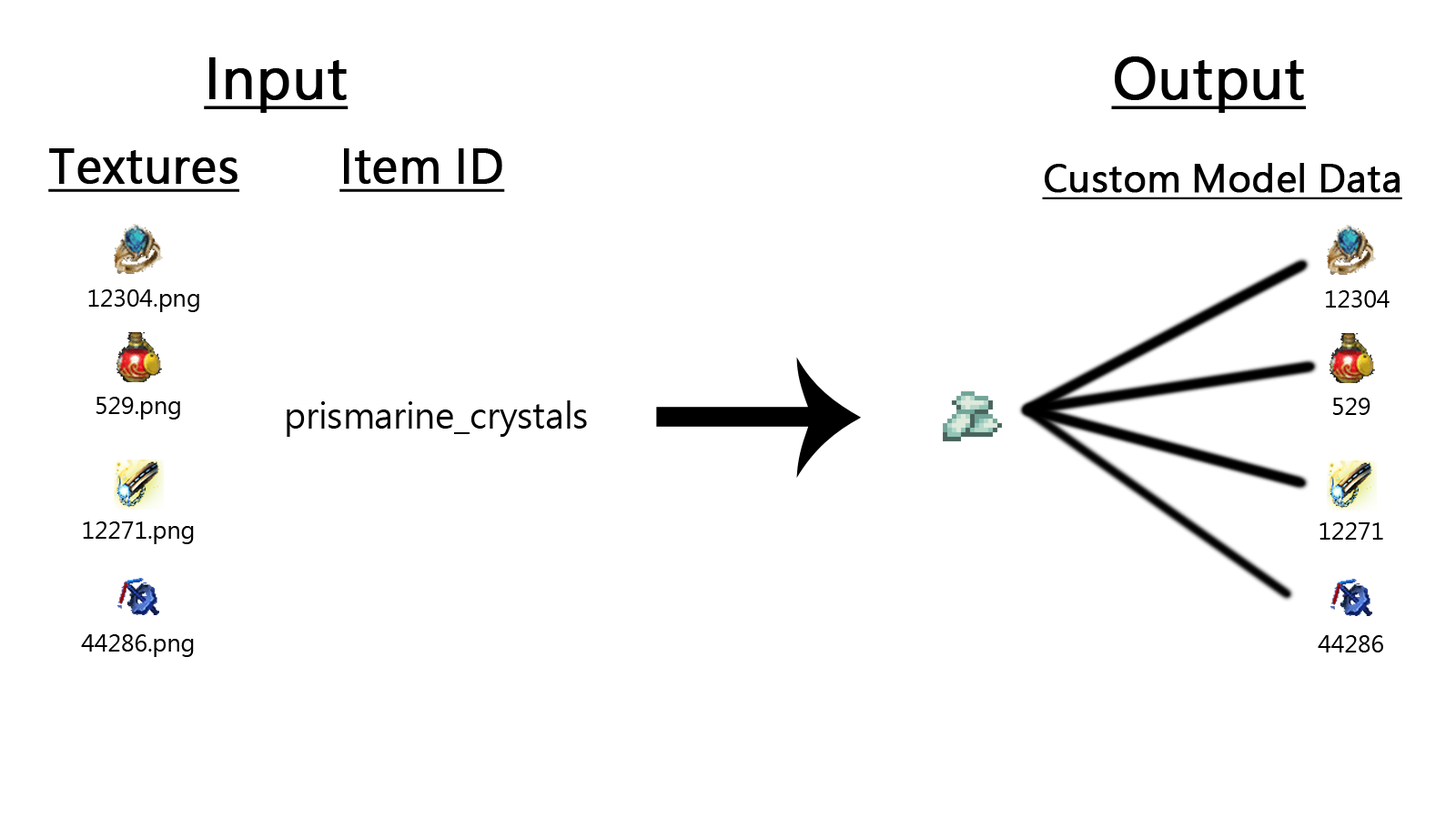
<style>
.page{position:relative;width:1456px;height:819px;background:#ffffff}
.page>*{position:absolute;margin:0}
.t1{font:54.6px "MicrosoftJhengHeiRegular";color:#000000;font-weight:bold;text-decoration:underline}
.t2{font:45.5px "MicrosoftJhengHeiRegular";color:#000000;font-weight:bold;text-decoration:underline}
.t3{font:36.4px "MicrosoftJhengHeiRegular";color:#000000;font-weight:bold;text-decoration:underline}
.t4{font:22.7px "MicrosoftJhengHeiRegular";color:#000000}
.t5{font:34.1px "MicrosoftJhengHeiRegular";color:#000000}
</style>
<div class="page">
<p class="t1" style="left:204px;top:57px;width:145px;height:56px">Input</p>
<p class="t1" style="left:1111px;top:56px;width:195px;height:57px">Output</p>
<p class="t2" style="left:48px;top:148px;width:191px;height:44px">Textures</p>
<p class="t2" style="left:339px;top:148px;width:166px;height:44px">Item ID</p>
<p class="t3" style="left:1042px;top:163px;width:360px;height:36px">Custom Model Data</p>
<p class="t4" style="left:88px;top:289px;width:111px;height:23px">12304.png</p>
<p class="t4" style="left:1326px;top:290px;width:64px;height:18px">12304</p>
<p class="t4" style="left:96px;top:397px;width:84px;height:23px">529.png</p>
<p class="t5" style="left:287px;top:400px;width:300px;height:37px">prismarine_crystals</p>
<p class="t4" style="left:1333px;top:398px;width:37px;height:17px">529</p>
<p class="t4" style="left:83px;top:521px;width:111px;height:23px">12271.png</p>
<p class="t4" style="left:1319px;top:522px;width:64px;height:18px">12271</p>
<p class="t4" style="left:81px;top:634px;width:113px;height:23px">44286.png</p>
<p class="t4" style="left:1318px;top:635px;width:65px;height:17px">44286</p>
</div>
